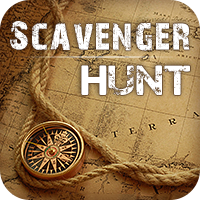
<style>
.page{position:relative;width:200px;height:200px}
.page>*{position:absolute;margin:0}
.t1{font:39.2px "28DaysLater";letter-spacing:0.05em;color:#ffffff;scale:0.96 1}
.t2{font:35.6px "LAStreetKids";letter-spacing:0.05em;color:#ffffff}
</style>
<div class="page">
<p class="t1" style="left:10px;top:21px;width:180px;height:30px">Scavenger</p>
<p class="t2" style="left:81px;top:65px;width:109px;height:30px">Hunt</p>
</div>
